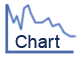
<style>
.page{position:relative;width:80px;height:60px;background:#ffffff}
.page>*{position:absolute;margin:0}
.t1{font:18px "ArialMT";letter-spacing:0.025em;color:#132a5a}
</style>
<div class="page">
<p class="t1" style="left:15px;top:35px;width:45px;height:13px">Chart</p>
</div>
